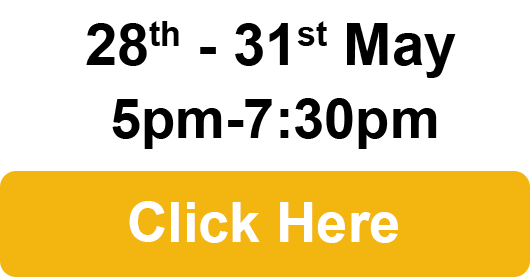
<style>
.page{position:relative;width:530px;height:277px;background:#ffffff}
.page>*{position:absolute;margin:0}
.t1{font:58px "Arial-BoldMT";color:#000000}
.t2{font:56px "Arial-BoldMT";color:#000000}
.t3{font:56px "Arial-BoldMT";color:#ffffff}
</style>
<div class="page">
<p class="t1" style="left:86px;top:21px;width:370px;height:57px">28th - 31st May</p>
<p class="t2" style="left:112px;top:98px;width:325px;height:51px">5pm-7:30pm</p>
<p class="t3" style="left:129px;top:201px;width:269px;height:42px">Click Here</p>
</div>
